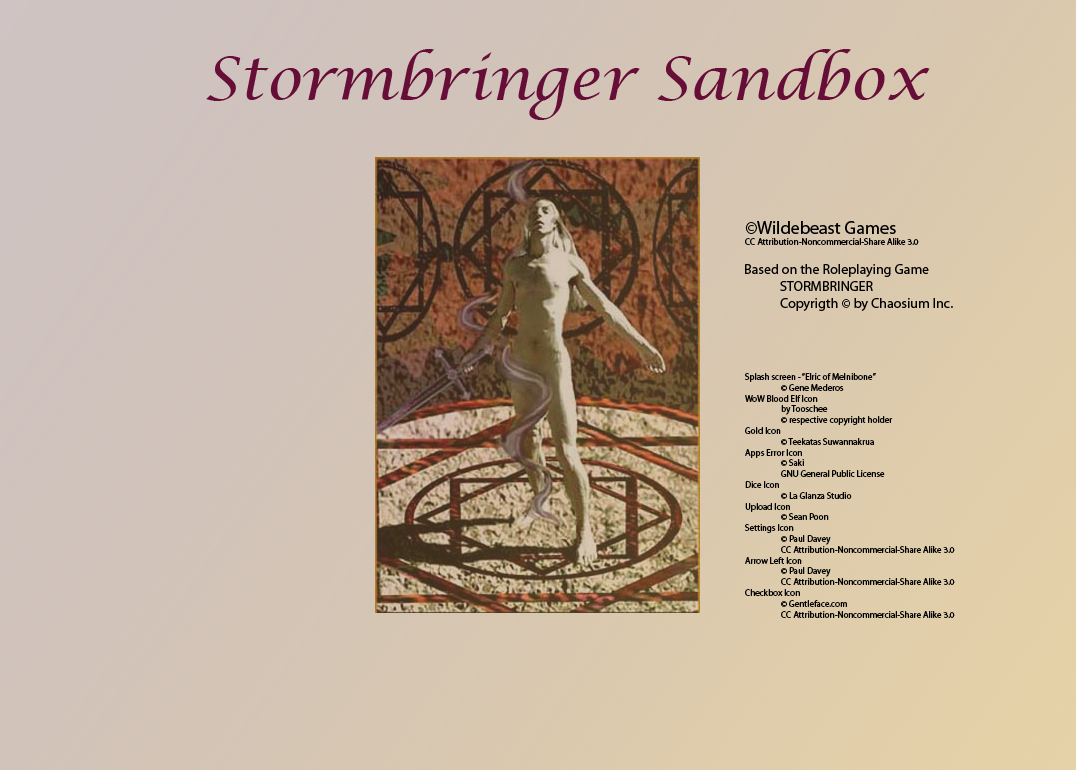
<style>
.page{position:relative;width:1076px;height:770px}
.page>*{position:absolute;margin:0}
.t1{font:60px "LucidaCalligraphy-Italic";color:#660e37}
.t2{font:9px "MyriadPro-Regular";color:#000000}
.t3{font:18px "MyriadPro-Regular";color:#000000}
.t4{font:14px "MyriadPro-Regular";color:#000000}
</style>
<div class="page">
<p class="t1" style="left:206px;top:49px;width:724px;height:71px">Stormbringer Sandbox</p>
<p class="t2" style="left:745px;top:221px;width:174px;height:24px"><span class="t3">©Wildebeast Games<br></span>CC Attribution-Noncommercial-Share Alike 3.0</p>
<p class="t4" style="left:745px;top:264px;width:208px;height:47px">Based on the Roleplaying Game<br> STORMBRINGER<br> Copyrigth © by Chaosium Inc.</p>
<p class="t2" style="left:745px;top:373px;width:210px;height:245px">Splash screen - “Elric of Melnibone”<br> © Gene Mederos<br>WoW Blood Elf Icon<br> by Tooschee<br> © respective copyright holder<br>Gold Icon<br> © Teekatas Suwannakrua<br>Apps Error Icon<br> © Saki<br> GNU General Public License<br>Dice Icon<br> © La Glanza Studio<br>Upload Icon<br> © Sean Poon<br>Settings Icon<br> © Paul Davey<br> CC Attribution-Noncommercial-Share Alike 3.0<br>Arrow Left Icon<br> © Paul Davey<br> CC Attribution-Noncommercial-Share Alike 3.0<br>Checkbox Icon<br> © Gentleface.com<br> CC Attribution-Noncommercial-Share Alike 3.0</p>
</div>
